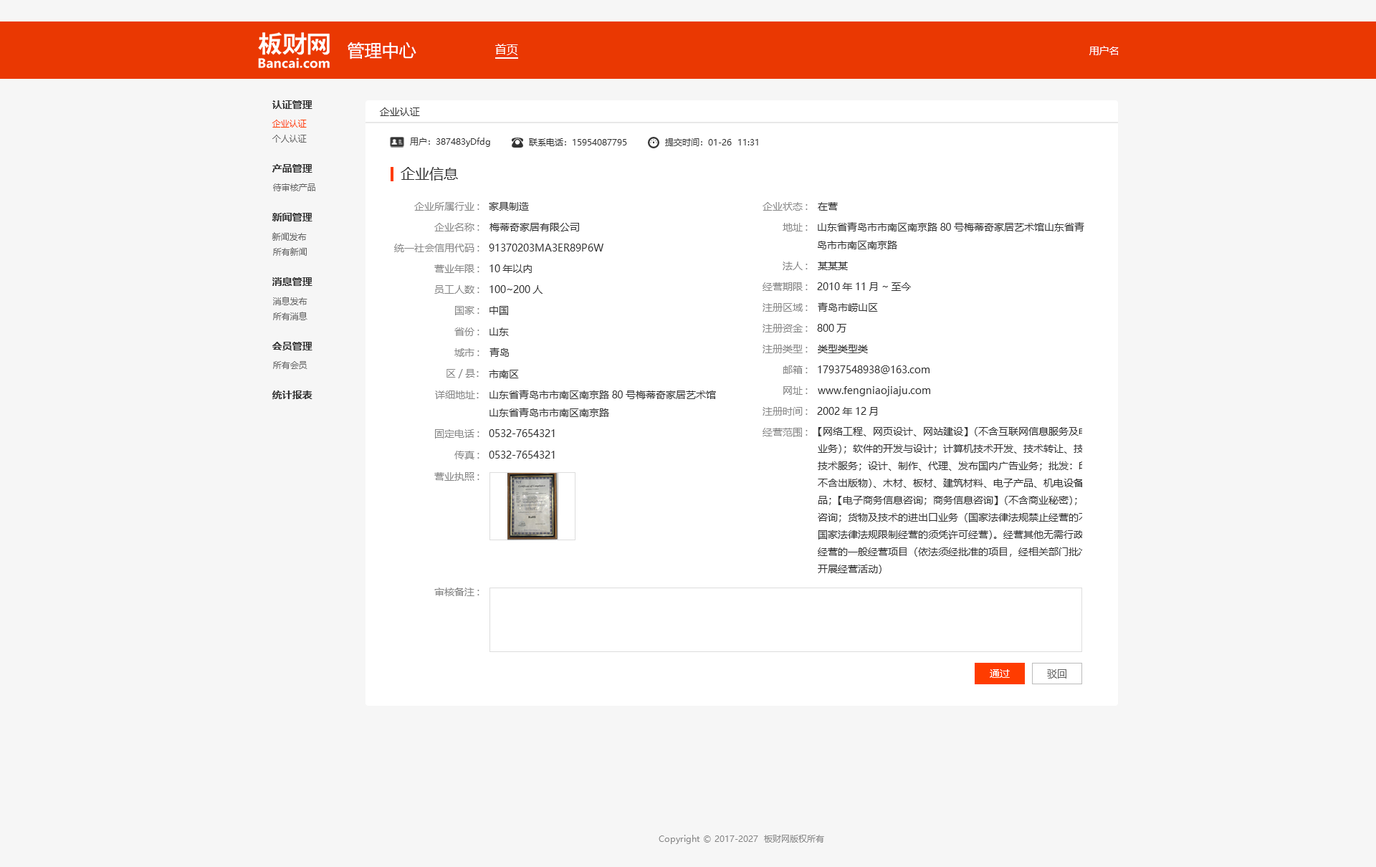
<style>
.page{position:relative;width:1376px;height:867px;background:#f6f6f6}
.page>*{position:absolute;margin:0}
.t1{font:17.2px "MicrosoftYaHei";color:#ffffff}
.t2{font:11.5px "MicrosoftYaHei";color:#ffffff}
.t3{font:10px "MicrosoftYaHei";color:#ffffff}
.t4{font:10px "MicrosoftYaHei-Bold";color:#333333}
.t5{font:10px "MicrosoftYaHei";color:#333333}
.t6{font:8.6px "MicrosoftYaHei";color:#ff3c00}
.t7{font:8.6px "MicrosoftYaHei";color:#666666}
.t8{font:8.6px "MicrosoftYaHei";color:#333333}
.t9{font:14.3px "MicrosoftYaHei";color:#333333}
.t10{font:10px "MicrosoftYaHei";color:#888888}
.t11{font:10px/17.2px "MicrosoftYaHei";color:#333333}
.t12{font:10px "MicrosoftYaHei";color:#666666}
.t13{font:8.6px "MicrosoftYaHei";color:#888888}
</style>
<div class="page">
<p class="t1" style="left:347px;top:42px;width:69px;height:17px">管理中心</p>
<p class="t2" style="left:495px;top:44px;width:23px;height:11px">首页</p>
<p class="t3" style="left:1089px;top:46px;width:29px;height:9px">用户名</p>
<p class="t4" style="left:272px;top:100px;width:40px;height:9px">认证管理</p>
<p class="t5" style="left:380px;top:107px;width:40px;height:9px">企业认证</p>
<p class="t6" style="left:272px;top:120px;width:35px;height:8px">企业认证</p>
<p class="t7" style="left:272px;top:135px;width:35px;height:8px">个人认证</p>
<p class="t8" style="left:410px;top:138px;width:80px;height:9px">用户：387483yDfdg</p>
<p class="t8" style="left:529px;top:138px;width:98px;height:8px">联系电话：15954087795</p>
<p class="t8" style="left:665px;top:138px;width:93px;height:8px">提交时间：01-26  11:31</p>
<p class="t4" style="left:272px;top:164px;width:40px;height:9px">产品管理</p>
<p class="t9" style="left:400px;top:167px;width:58px;height:14px">企业信息</p>
<p class="t7" style="left:273px;top:183px;width:42px;height:8px">待审核产品</p>
<p class="t10" style="left:414px;top:202px;width:65px;height:9px">企业所属行业:</p>
<p class="t5" style="left:489px;top:202px;width:40px;height:9px">家具制造</p>
<p class="t10" style="left:762px;top:202px;width:45px;height:9px">企业状态:</p>
<p class="t5" style="left:817px;top:202px;width:21px;height:9px">在营</p>
<p class="t4" style="left:272px;top:213px;width:40px;height:8px">新闻管理</p>
<p class="t7" style="left:272px;top:232px;width:35px;height:9px">新闻发布</p>
<p class="t10" style="left:434px;top:223px;width:45px;height:8px">企业名称:</p>
<p class="t5" style="left:489px;top:223px;width:90px;height:8px">梅蒂奇家居有限公司</p>
<p class="t10" style="left:782px;top:223px;width:25px;height:8px">地址:</p>
<p class="t5" style="left:817px;top:222px;width:267px;height:27px">山东省青岛市市南区南京路80号梅蒂奇家居艺术馆山东省青<br>岛市市南区南京路</p>
<p class="t10" style="left:394px;top:244px;width:85px;height:8px">统一社会信用代码:</p>
<p class="t5" style="left:489px;top:244px;width:114px;height:7px">91370203MA3ER89P6W</p>
<p class="t7" style="left:273px;top:247px;width:34px;height:9px">所有新闻</p>
<p class="t10" style="left:434px;top:264px;width:45px;height:9px">营业年限:</p>
<p class="t5" style="left:489px;top:264px;width:43px;height:9px">10年以内</p>
<p class="t10" style="left:782px;top:261px;width:25px;height:9px">法人:</p>
<p class="t5" style="left:817px;top:261px;width:31px;height:9px">某某某</p>
<p class="t4" style="left:272px;top:277px;width:40px;height:9px">消息管理</p>
<p class="t10" style="left:434px;top:285px;width:45px;height:9px">员工人数:</p>
<p class="t5" style="left:489px;top:285px;width:53px;height:9px">100~200人</p>
<p class="t10" style="left:762px;top:282px;width:45px;height:9px">经营期限:</p>
<p class="t5" style="left:817px;top:282px;width:94px;height:9px">2010年11月~至今</p>
<p class="t7" style="left:273px;top:297px;width:34px;height:8px">消息发布</p>
<p class="t10" style="left:455px;top:306px;width:24px;height:9px">国家:</p>
<p class="t5" style="left:489px;top:306px;width:19px;height:9px">中国</p>
<p class="t10" style="left:762px;top:303px;width:45px;height:9px">注册区域:</p>
<p class="t5" style="left:817px;top:302px;width:61px;height:10px">青岛市崂山区</p>
<p class="t7" style="left:273px;top:312px;width:34px;height:8px">所有消息</p>
<p class="t10" style="left:454px;top:327px;width:25px;height:9px">省份:</p>
<p class="t5" style="left:489px;top:327px;width:20px;height:9px">山东</p>
<p class="t10" style="left:762px;top:324px;width:45px;height:8px">注册资金:</p>
<p class="t5" style="left:817px;top:324px;width:29px;height:8px">800万</p>
<p class="t4" style="left:272px;top:342px;width:40px;height:8px">会员管理</p>
<p class="t10" style="left:454px;top:348px;width:25px;height:9px">城市:</p>
<p class="t5" style="left:489px;top:347px;width:20px;height:10px">青岛</p>
<p class="t10" style="left:762px;top:345px;width:45px;height:8px">注册类型:</p>
<p class="t5" style="left:817px;top:345px;width:51px;height:8px">类型类型类</p>
<p class="t7" style="left:273px;top:361px;width:34px;height:8px">所有会员</p>
<p class="t10" style="left:783px;top:365px;width:24px;height:9px">邮箱:</p>
<p class="t5" style="left:817px;top:365px;width:112px;height:9px">17937548938@163.com</p>
<p class="t10" style="left:446px;top:369px;width:33px;height:9px">区/县：</p>
<p class="t5" style="left:489px;top:370px;width:30px;height:8px">市南区</p>
<p class="t5" style="left:489px;top:390px;width:227px;height:27px">山东省青岛市市南区南京路80号梅蒂奇家居艺术馆<br>山东省青岛市市南区南京路</p>
<p class="t10" style="left:783px;top:386px;width:24px;height:9px">网址:</p>
<p class="t5" style="left:817px;top:386px;width:113px;height:10px">www.fengniaojiaju.com</p>
<p class="t4" style="left:272px;top:390px;width:40px;height:9px">统计报表</p>
<p class="t10" style="left:435px;top:390px;width:44px;height:9px">详细地址：</p>
<p class="t10" style="left:762px;top:407px;width:45px;height:9px">注册时间:</p>
<p class="t5" style="left:817px;top:407px;width:60px;height:9px">2002年12月</p>
<p class="t10" style="left:435px;top:429px;width:44px;height:9px">固定电话:</p>
<p class="t5" style="left:489px;top:429px;width:66px;height:8px">0532-7654321</p>
<p class="t10" style="left:762px;top:428px;width:45px;height:9px">经营范围:</p>
<p class="t11" style="left:817px;top:427px;width:306px;height:147px">【网络工程、网页设计、网站建设】（不含互联网信息服务及电信增值<br>业务）；软件的开发与设计；计算机技术开发、技术转让、技术咨询、<br>技术服务；设计、制作、代理、发布国内广告业务；批发：印刷品（<br>不含出版物）、木材、板材、建筑材料、电子产品、机电设备、金属制<br>品；【电子商务信息咨询；商务信息咨询】（不含商业秘密）；物流信息<br>咨询；货物及技术的进出口业务（国家法律法规禁止经营的不得经营，<br>国家法律法规限制经营的须凭许可经营）。经营其他无需行政审批即可<br>经营的一般经营项目（依法须经批准的项目，经相关部门批准后方可<br>开展经营活动）</p>
<p class="t10" style="left:454px;top:451px;width:25px;height:8px">传真:</p>
<p class="t5" style="left:489px;top:451px;width:66px;height:8px">0532-7654321</p>
<p class="t10" style="left:434px;top:472px;width:45px;height:9px">营业执照:</p>
<p class="t10" style="left:434px;top:587px;width:45px;height:9px">审核备注:</p>
<p class="t3" style="left:989px;top:669px;width:20px;height:9px">通过</p>
<p class="t12" style="left:1047px;top:669px;width:19px;height:9px">驳回</p>
<p class="t13" style="left:658px;top:835px;width:166px;height:9px">Copyright © 2017-2027  板财网版权所有</p>
</div>
